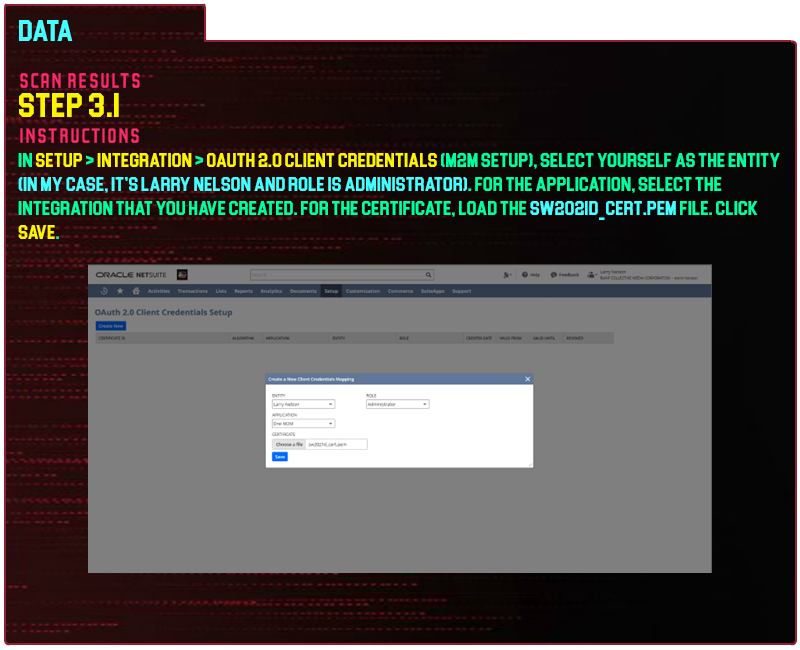
<style>
.page{position:relative;width:800px;height:650px;background:#7f7f7f}
.page>*{position:absolute;margin:0}
.t1{font:30px "Blockletter";color:#43ffff}
.t2{font:35px "Party-Lights-[WLM]-Flat";color:#ff296d}
.t3{font:35px "Blockletter";color:#fdf500}
.t4{font:20px "Blockletter";color:#00ff9f}
.t5{font:20px "Blockletter";color:#fdf500}
.t6{font:20px "Blockletter";color:#43ffff}
</style>
<div class="page">
<p class="t1" style="left:19px;top:20px;width:54px;height:21px">Data</p>
<p class="t2" style="left:20px;top:73px;width:120px;height:15px">Scan REsults</p>
<p class="t3" style="left:19px;top:93px;width:100px;height:24px">step 3.1</p>
<p class="t2" style="left:20px;top:128px;width:119px;height:15px">instructions</p>
<p class="t4" style="left:18px;top:153px;width:762px;height:86px">in <span class="t5">setup</span> &gt; <span class="t5">integration</span> &gt; <span class="t5">0auth 2.0 client credentials</span> (m2m setup), select yourself as the entity <span class="t6">(in my case, it’s larry nelson and role is administrator)</span>. for the application, select the integration that you have created. For the certificate, load the <span class="t6">sw2021d_cert.pem</span> file. click <span class="t5">save</span>.</p>
</div>
